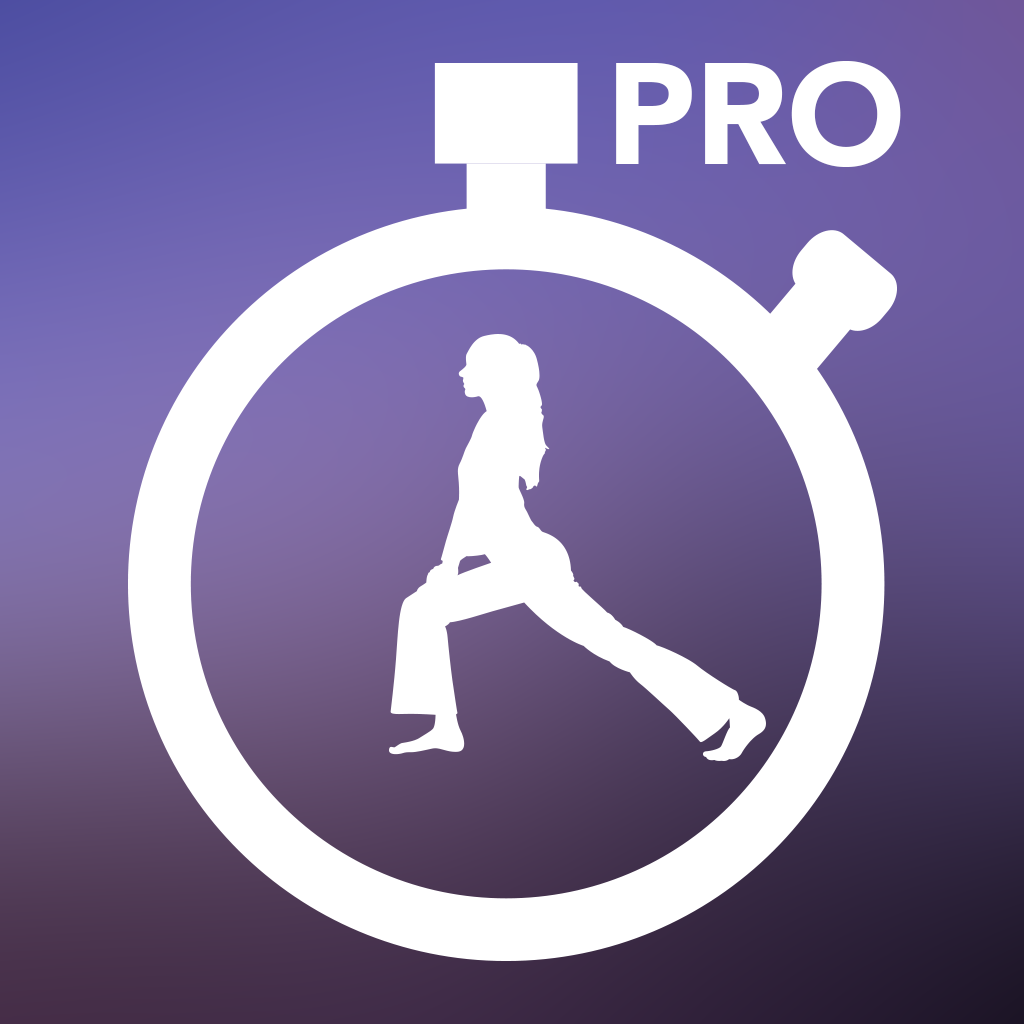
<style>
.page{position:relative;width:1024px;height:1024px;background:#ffffff}
.page>*{position:absolute;margin:0}
.t1{font:142px "Avenir-Black";color:#ffffff}
</style>
<div class="page">
<p class="t1" style="left:616px;top:61px;width:285px;height:106px">PRO</p>
</div>
